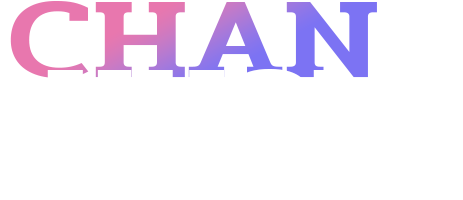
<style>
.page{position:relative;width:463px;height:200px;background:#ffffff}
.page>*{position:absolute;margin:0}
.t1{font:115.1px "Pridi-Medium";scale:1.23 1}
</style>
<div class="page">
<p class="t1" style="left:10px;top:1px;width:367px;height:77px">CHAN</p>
</div>
